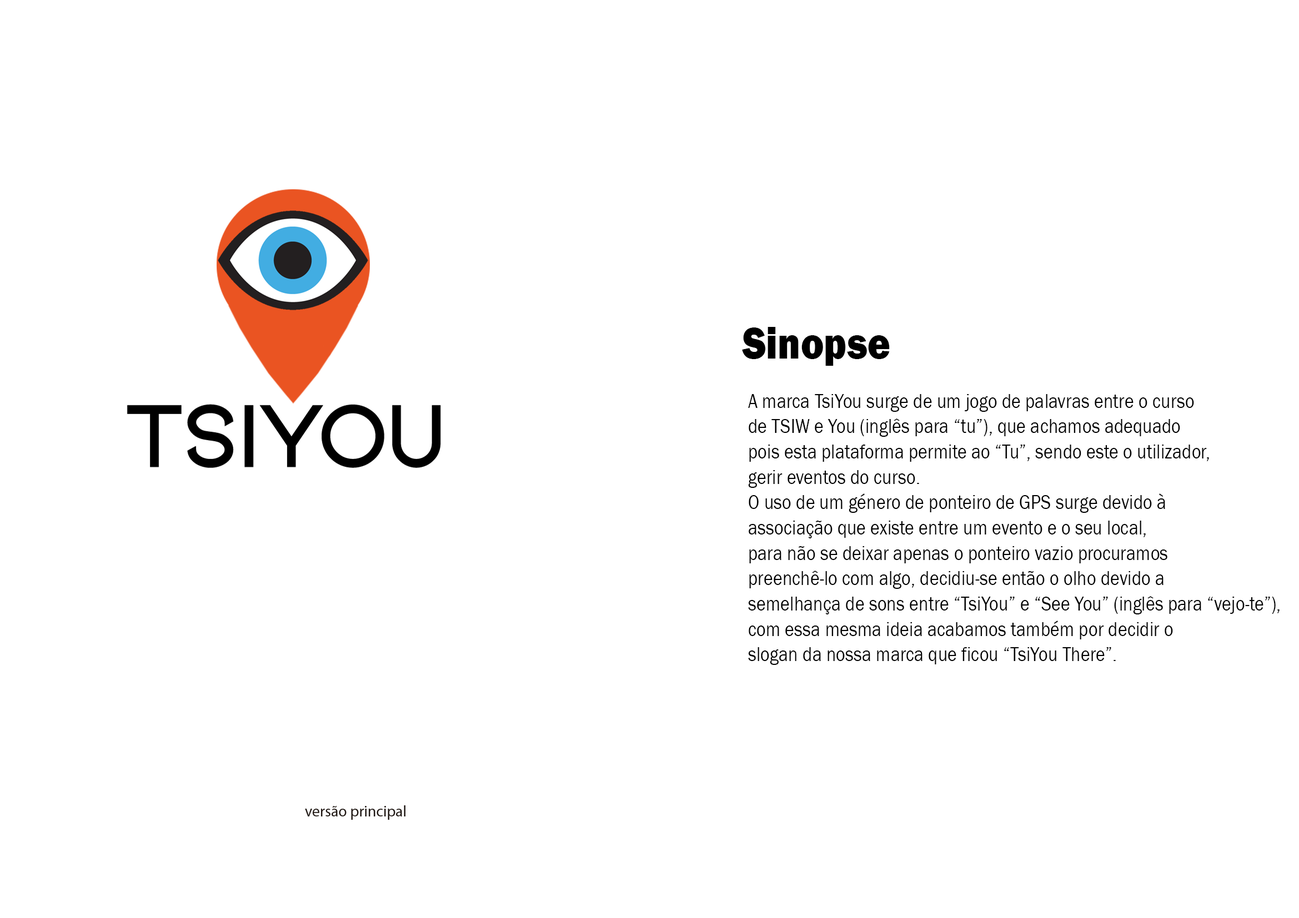
<style>
.page{position:relative;width:1299px;height:918px;background:#ffffff}
.page>*{position:absolute;margin:0}
.t1{font:46.3px "FranklinGothic-Heavy";color:#000000;scale:0.84 1}
.t2{font:21.1px "FranklinGothic-Book";color:#000000;scale:0.85 1}
</style>
<div class="page">
<p class="t1" style="left:742px;top:327px;width:147px;height:39px">Sinopse</p>
<p class="t2" style="left:748px;top:394px;width:531px;height:271px">A marca TsiYou surge de um jogo de palavras entre o curso<br>de TSIW e You (inglês para “tu”), que achamos adequado <br>pois esta plataforma permite ao “Tu”, sendo este o utilizador, <br>gerir eventos do curso.<br>O uso de um género de ponteiro de GPS surge devido à <br>associação que existe entre um evento e o seu local, <br>para não se deixar apenas o ponteiro vazio procuramos<br>preenchê-lo com algo, decidiu-se então o olho devido a <br>semelhança de sons entre “TsiYou” e “See You” (inglês para “vejo-te”), <br>com essa mesma ideia acabamos também por decidir o <br>slogan da nossa marca que ficou “TsiYou There”.</p>
</div>
